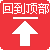
<style>
.page{position:relative;width:50px;height:50px;background:#f0343c}
.page>*{position:absolute;margin:0}
.t1{font:12px "SimSun";color:#fefcfc}
</style>
<div class="page">
<p class="t1" style="left:3px;top:3px;width:46px;height:11px">回到顶部</p>
</div>
